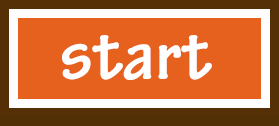
<style>
.page{position:relative;width:279px;height:126px;background:#e6611d}
.page>*{position:absolute;margin:0}
.t1{font:76px "TektonPro-BoldCond";color:#ffffff;scale:1.1 1}
</style>
<div class="page">
<p class="t1" style="left:62px;top:35px;width:150px;height:45px">start</p>
</div>
